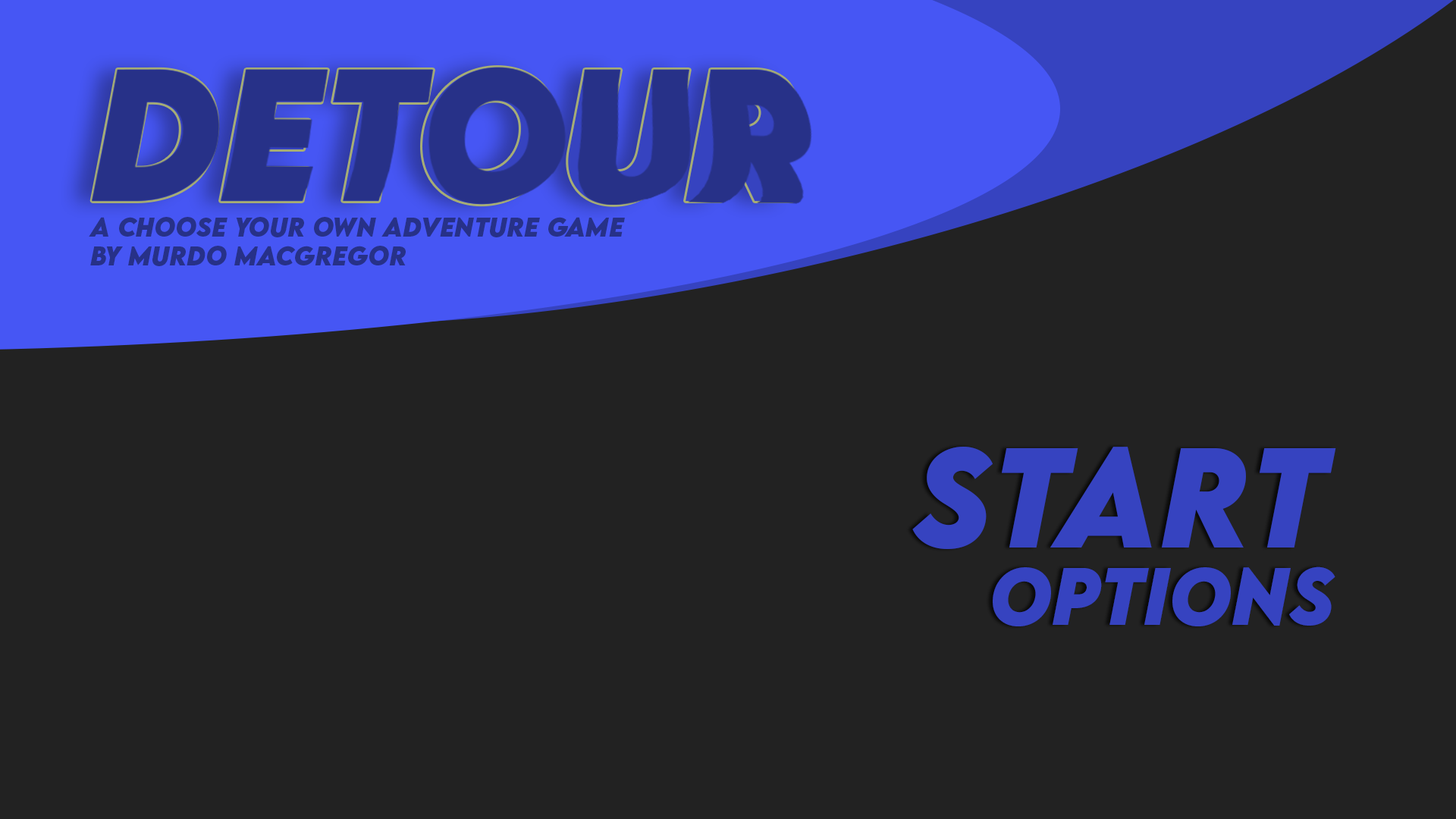
<style>
.page{position:relative;width:1456px;height:819px;background:#222222}
.page>*{position:absolute;margin:0}
.t1{font:167px "LEMONMILK-BoldItalic";color:#273188}
.t2{font:24px "LEMONMILK-BoldItalic";color:#273188}
.t3{font:126.4px "LEMONMILK-BoldItalic";color:#3643c0}
.t4{font:72.3px "LEMONMILK-BoldItalic";color:#3643c0}
</style>
<div class="page">
<p class="t1" style="left:92px;top:67px;width:704px;height:138px">detour</p>
<p class="t2" style="left:89px;top:217px;width:536px;height:49px;text-align:right">a choose your own adventure game<br>by murdo macgregor</p>
<p class="t3" style="left:912px;top:447px;width:424px;height:102px">start</p>
<p class="t4" style="left:993px;top:566px;width:342px;height:60px">options</p>
</div>
